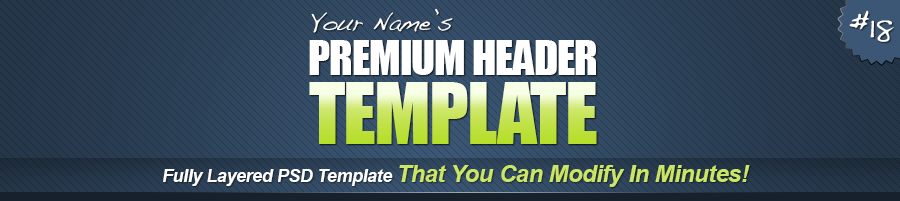
<style>
.page{position:relative;width:900px;height:201px}
.page>*{position:absolute;margin:0}
.t1{font:24px "Handwriting-Dakota";letter-spacing:-0.025em;color:#ffffff}
.t2{font:36px "Handwriting-Dakota";letter-spacing:-0.025em;color:#ffffff}
.t3{font:44.2px "Impact";letter-spacing:-0.025em;color:#ffffff;text-transform:uppercase}
.t4{font:78.9px "Impact";letter-spacing:-0.025em;text-transform:uppercase}
.t5{font:24px "Arial-BoldItalicMT";letter-spacing:-0.025em;color:#cbe664}
.t6{font:18px "Arial-BoldItalicMT";letter-spacing:-0.025em;color:#ffffff}
</style>
<div class="page">
<p class="t1" style="left:311px;top:9px;width:142px;height:24px">Your Name’s</p>
<p class="t2" style="left:849px;top:10px;width:45px;height:32px">#18</p>
<p class="t3" style="left:309px;top:40px;width:287px;height:35px">Premium Header</p>
<p class="t4" style="left:309px;top:82px;width:288px;height:62px">Template</p>
<p class="t5" style="left:163px;top:165px;width:587px;height:22px"><span class="t6">Fully Layered PSD Template </span>That You Can Modify In Minutes!</p>
</div>
